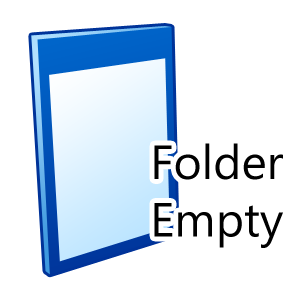
<style>
.page{position:relative;width:300px;height:300px;background:#ffffff}
.page>*{position:absolute;margin:0}
.t1{font:48px "SegoeUI-Regular";color:#000000}
</style>
<div class="page">
<p class="t1" style="left:154px;top:143px;width:129px;height:105px">Folder<br>Empty</p>
</div>
